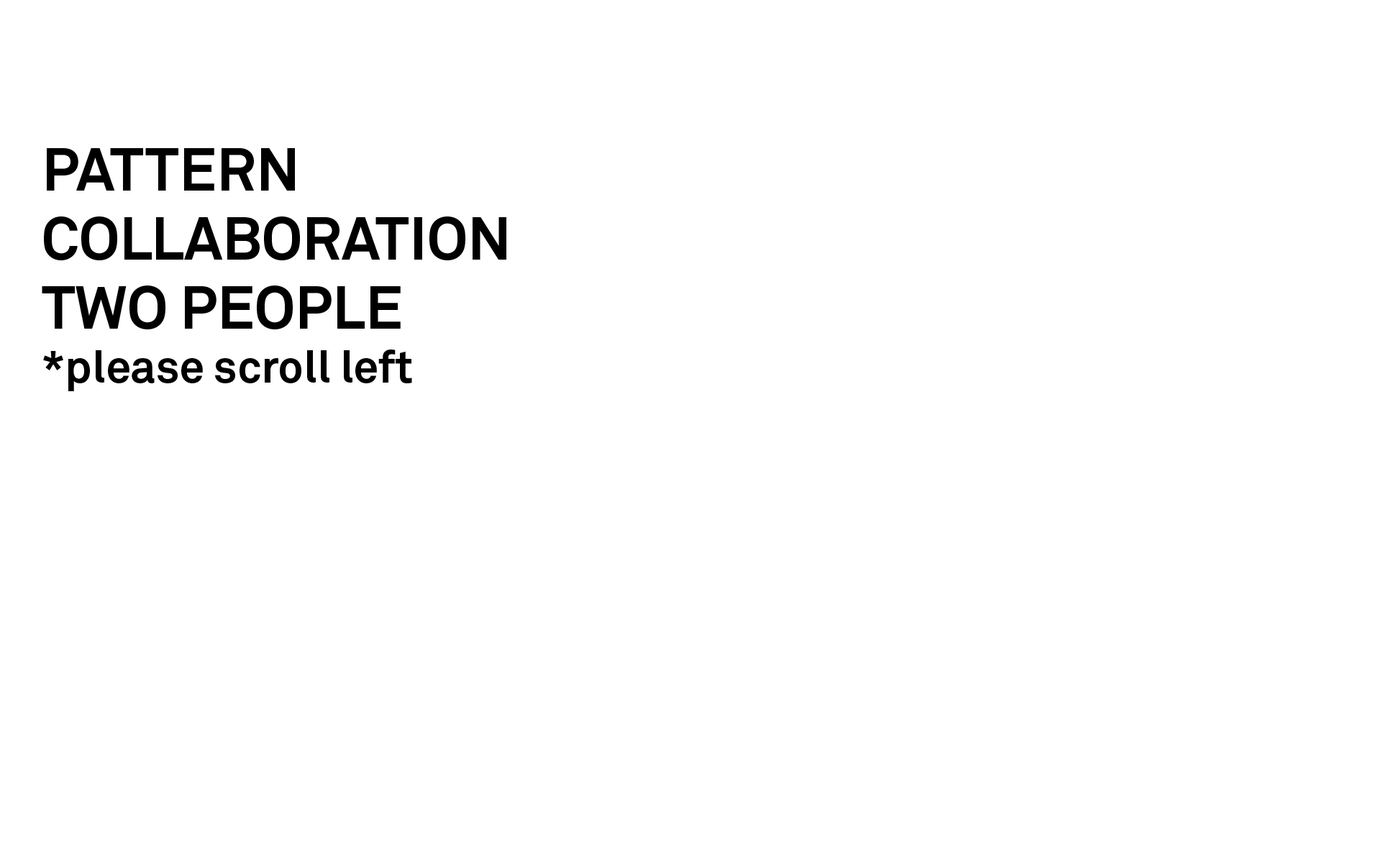
<style>
.page{position:relative;width:1381px;height:863px;background:#ffffff}
.page>*{position:absolute;margin:0}
.t1{font:60px/68.9px "AkkuratPro-Bold";color:#000000}
.t2{font:45px/54px "AkkuratPro-Bold";color:#000000}
</style>
<div class="page">
<p class="t1" style="left:42px;top:148px;width:464px;height:243px">PATTERN<br>COLLABORATION<br>TWO PEOPLE <br><span class="t2">*please scroll left</span></p>
</div>
